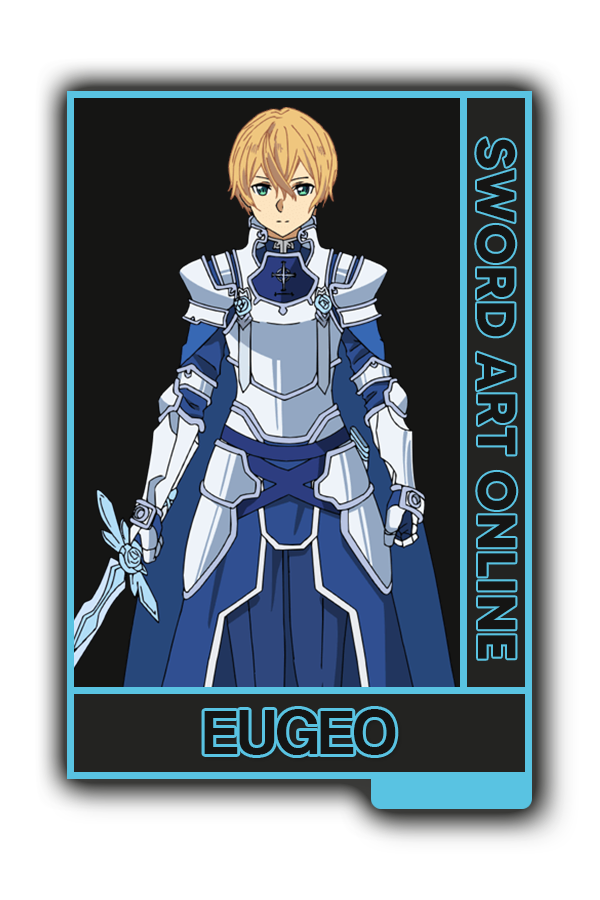
<style>
.page{position:relative;width:600px;height:900px;background:#ffffff}
.page>*{position:absolute;margin:0}
.t1{font:53.7px "MADETOMMY-Bold";color:#151514}
.t2{font:65.3px "CoolveticaRg-Regular";color:#151514}
</style>
<div class="page">
<p class="t1" style="left:476px;top:138px;width:41px;height:521px;rotate:90deg">SWORD ART ONLINE</p>
<p class="t2" style="left:204px;top:709px;width:192px;height:46px">EUGEO</p>
</div>
